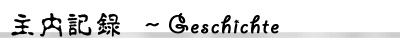
<style>
.page{position:relative;width:400px;height:50px;background:#ffffff}
.page>*{position:absolute;margin:0}
.t1{font:27px "GiddyupStd";letter-spacing:0.06em;color:#000000;font-weight:bold}
.t2{font:27px "¾­µä·±µ­¹Å Regular";letter-spacing:0.06em;color:#000000}
.t3{font:27px "¾­µä·±µ­¹Å Regular";letter-spacing:0.06em;color:#000000;font-weight:bold}
</style>
<div class="page">
<p class="t1" style="left:11px;top:13px;width:268px;height:24px"><span class="t2">主内记录 </span><span class="t3">～</span>Geschichte</p>
</div>
